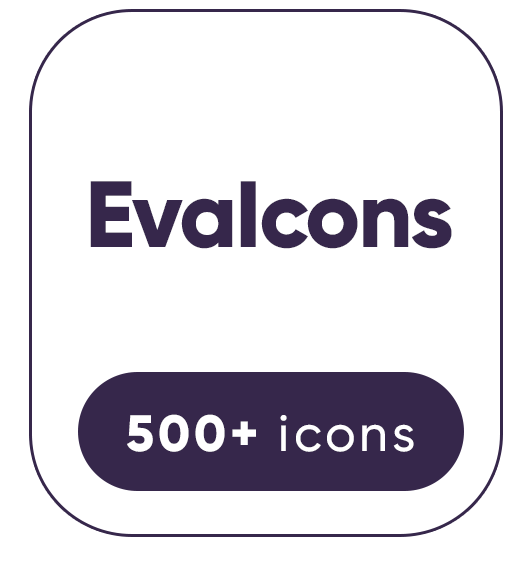
<style>
.page{position:relative;width:526px;height:563px;background:#ffffff}
.page>*{position:absolute;margin:0}
.t1{font:93.8px "Gilroy-ExtraBold";letter-spacing:-0.025em;color:#36274b}
.t2{font:50.9px "Gilroy-Medium";letter-spacing:0.075em;color:#ffffff}
.t3{font:50.9px "Gilroy-ExtraBold";letter-spacing:0.075em;color:#ffffff}
</style>
<div class="page">
<p class="t1" style="left:90px;top:181px;width:362px;height:68px">EvaIcons</p>
<p class="t2" style="left:127px;top:414px;width:287px;height:38px"><span class="t3">500+ </span>icons</p>
</div>
